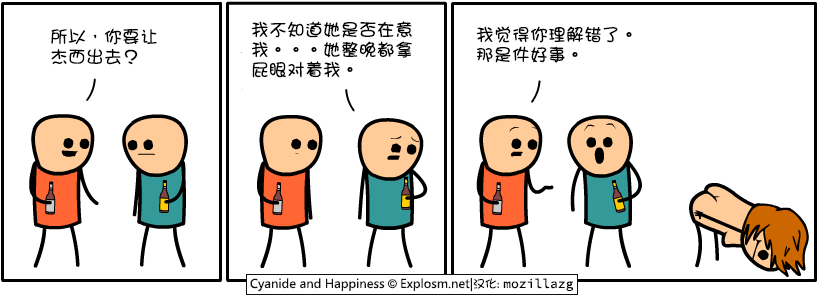
<style>
.page{position:relative;width:820px;height:300px;background:#ffffff}
.page>*{position:absolute;margin:0}
.t1{font:18px/20px "DFGirl";color:#000000}
</style>
<div class="page">
<p class="t1" style="left:51px;top:28px;width:106px;height:37px">所以，你要让<br>杰西出去？</p>
<p class="t1" style="left:251px;top:21px;width:161px;height:57px">我不知道她是否在意<br>我。。。她整晚都拿<br>屁眼对着我。</p>
<p class="t1" style="left:476px;top:26px;width:156px;height:37px">我觉得你理解错了。<br>那是件好事。</p>
</div>
